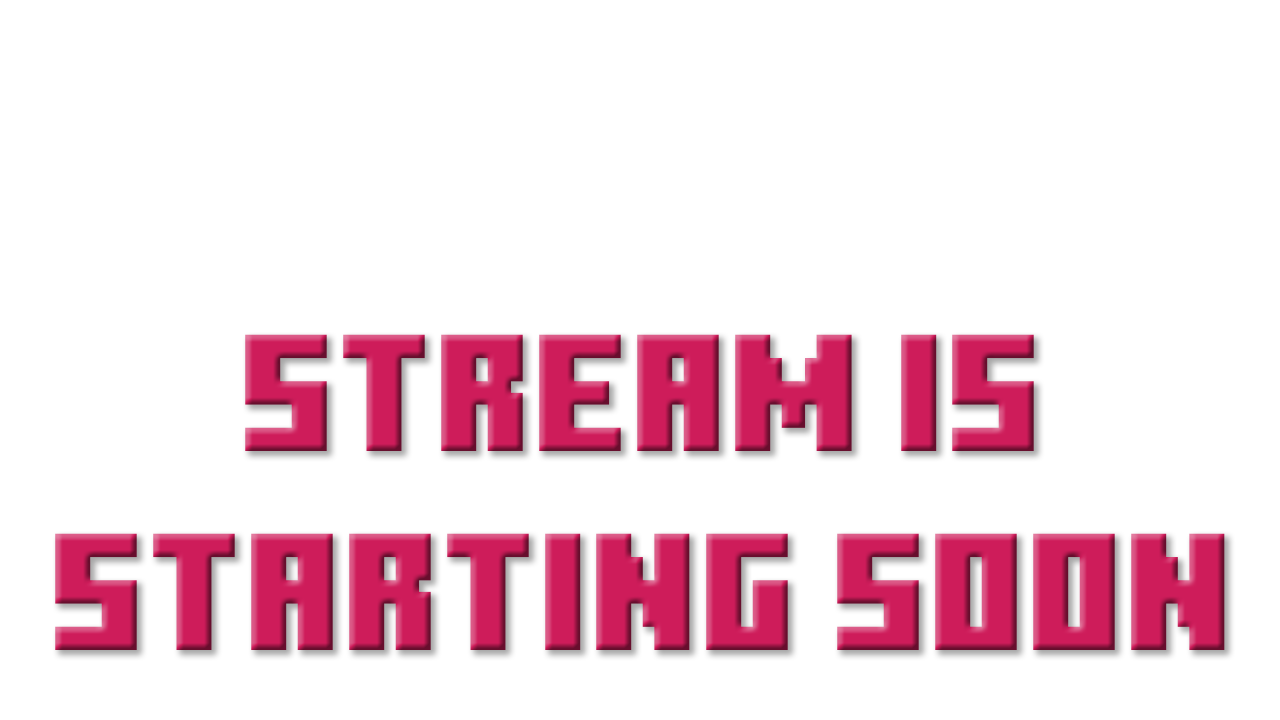
<style>
.page{position:relative;width:1280px;height:720px;background:#ffffff}
.page>*{position:absolute;margin:0}
.t1{font:166px "MinecraftTen";color:#ce1c5a}
</style>
<div class="page">
<p class="t1" style="left:55px;top:334px;width:1170px;height:316px;text-align:center">Stream is<br>starting soon</p>
</div>
